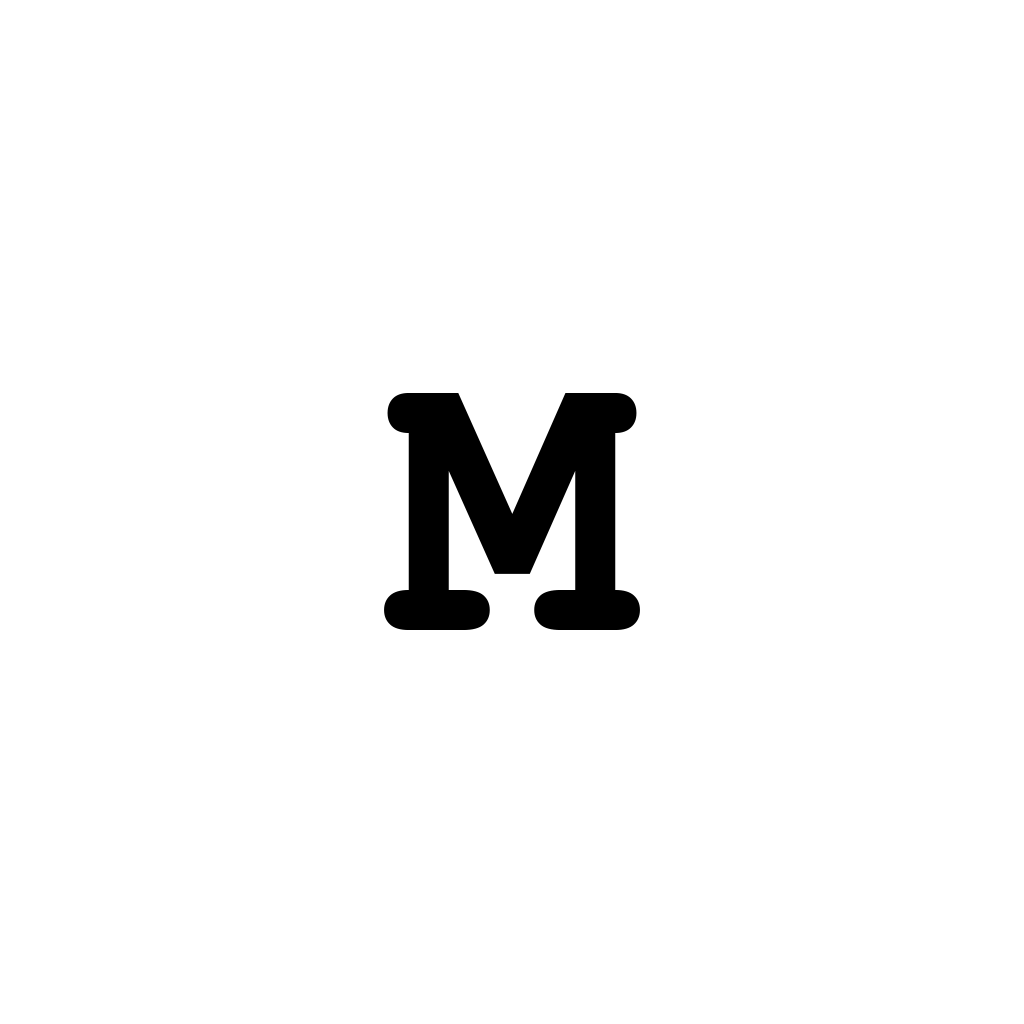
<style>
.page{position:relative;width:1024px;height:1024px;background:#ffffff}
.page>*{position:absolute;margin:0}
.t1{font:400px "CourierNewPS-BoldMT";color:#000000}
</style>
<div class="page">
<p class="t1" style="left:384px;top:393px;width:256px;height:237px">M</p>
</div>
